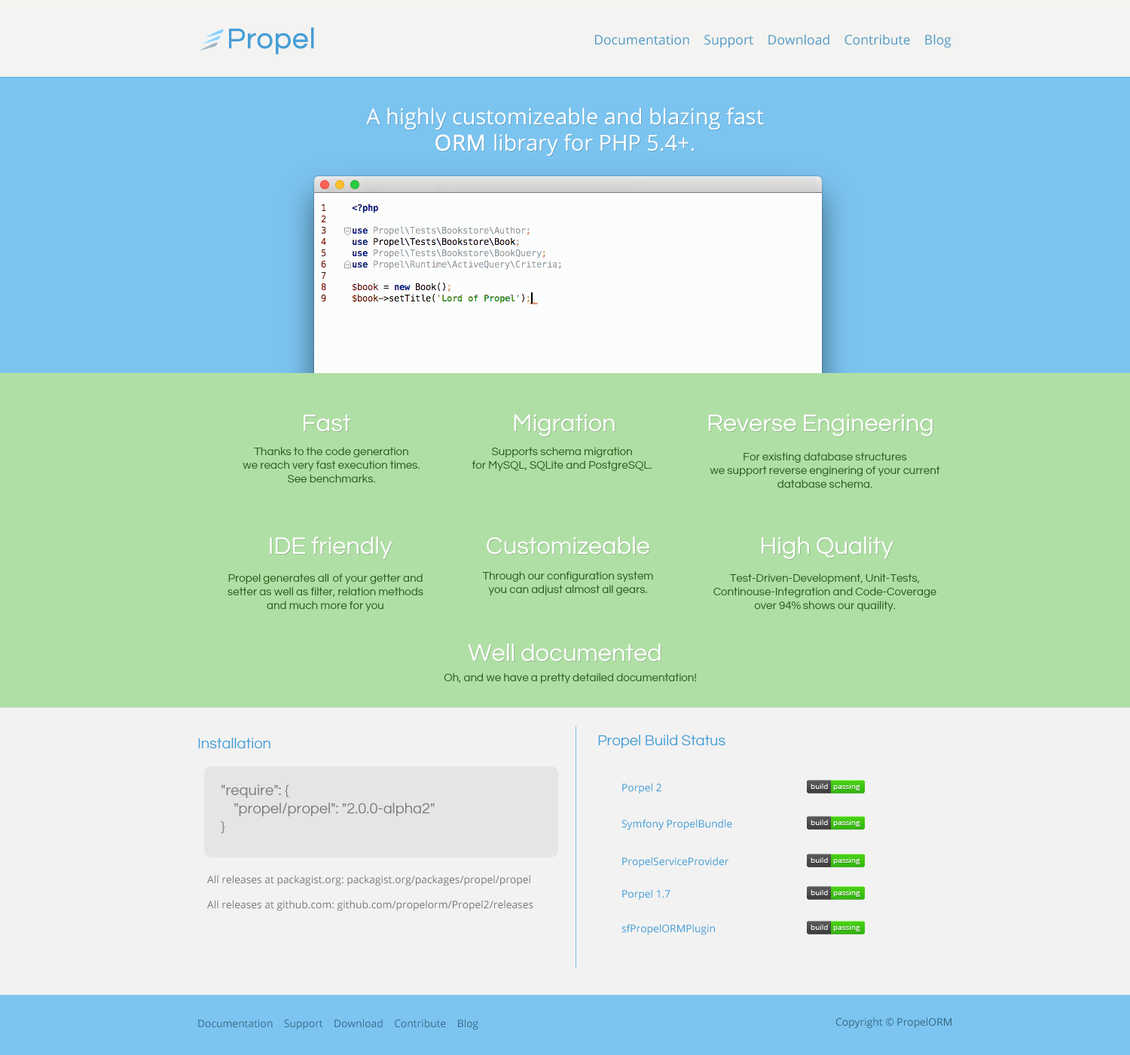
<style>
.page{position:relative;width:1130px;height:1055px;background:#b0dfa5}
.page>*{position:absolute;margin:0}
.t1{font:29.4px "Questrial-Regular";color:#469ed6;font-weight:bold}
.t2{font:13.3px "OpenSans";color:#549cc8}
.t3{font:21.8px "OpenSans";color:#ffffff}
.t4{font:21.8px "OpenSans";color:#ffffff;font-weight:bold}
.t5{font:24.6px "Questrial-Regular";color:#ffffff}
.t6{font:11.4px "Questrial-Regular";color:#275e1a}
.t7{font:15.2px "Questrial-Regular";color:#469ed6}
.t8{font:15.2px "Questrial-Regular";color:#7a7a7a}
.t9{font:10.4px "OpenSans";color:#469ed6}
.t10{font:10.4px "OpenSans";color:#7a7a7a}
.t11{font:10.4px "OpenSans";color:#376e90}
.t12{font:10.4px "OpenSans";color:#356784}
</style>
<div class="page">
<p class="t1" style="left:229px;top:27px;width:85px;height:27px">Propel</p>
<p class="t2" style="left:595px;top:34px;width:357px;height:14px">Documentation    Support    Download    Contribute    Blog</p>
<p class="t3" style="left:366px;top:107px;width:398px;height:49px;text-align:center">A highly customizeable and blazing fast<br><span class="t4">ORM </span>library for PHP 5.4+.</p>
<p class="t5" style="left:514px;top:414px;width:101px;height:22px">Migration</p>
<p class="t5" style="left:708px;top:414px;width:225px;height:22px">Reverse Engineering</p>
<p class="t5" style="left:304px;top:414px;width:46px;height:18px">Fast</p>
<p class="t6" style="left:243px;top:447px;width:177px;height:36px;text-align:center">Thanks to the code generation<br>we reach very fast execution times.<br>See benchmarks.</p>
<p class="t6" style="left:472px;top:447px;width:180px;height:24px;text-align:center">Supports schema migration<br>for MySQL, SQLite and PostgreSQL.</p>
<p class="t6" style="left:710px;top:452px;width:230px;height:36px;text-align:center">For existing database structures<br>we support reverse enginering of your current<br>database schema.</p>
<p class="t5" style="left:270px;top:537px;width:123px;height:22px">IDE friendly</p>
<p class="t5" style="left:487px;top:537px;width:163px;height:18px">Customizeable</p>
<p class="t5" style="left:762px;top:537px;width:132px;height:22px">High Quality</p>
<p class="t6" style="left:228px;top:573px;width:195px;height:39px;text-align:center">Propel generates all of your getter and<br>setter as well as filter, relation methods<br>and much more for you</p>
<p class="t6" style="left:482px;top:571px;width:171px;height:24px;text-align:center">Through our configuration system<br>you can adjust almost all gears.</p>
<p class="t6" style="left:714px;top:573px;width:223px;height:39px;text-align:center">Test-Driven-Development, Unit-Tests,<br>Continouse-Integration and Code-Coverage<br>over 94% shows our quaility.</p>
<p class="t5" style="left:468px;top:644px;width:193px;height:18px">Well documented</p>
<p class="t6" style="left:444px;top:673px;width:252px;height:10px">Oh, and we have a pretty detailed documentation!</p>
<p class="t7" style="left:198px;top:738px;width:73px;height:11px">Installation</p>
<p class="t7" style="left:598px;top:735px;width:128px;height:13px">Propel Build Status</p>
<p class="t8" style="left:221px;top:784px;width:214px;height:49px">"require": {<br>    "propel/propel": "2.0.0-alpha2"<br>}</p>
<p class="t9" style="left:622px;top:783px;width:40px;height:11px">Porpel 2</p>
<p class="t9" style="left:622px;top:819px;width:110px;height:11px">Symfony PropelBundle</p>
<p class="t9" style="left:622px;top:857px;width:107px;height:11px">PropelServiceProvider</p>
<p class="t10" style="left:207px;top:875px;width:327px;height:36px">All releases at packagist.org: packagist.org/packages/propel/propel<br><br>All releases at github.com: github.com/propelorm/Propel2/releases</p>
<p class="t9" style="left:622px;top:889px;width:49px;height:11px">Porpel 1.7</p>
<p class="t9" style="left:622px;top:924px;width:93px;height:11px">sfPropelORMPlugin</p>
<p class="t11" style="left:198px;top:1019px;width:280px;height:11px">Documentation    Support    Download    Contribute    Blog</p>
<p class="t12" style="left:836px;top:1017px;width:116px;height:12px">Copyright © PropelORM</p>
</div>
